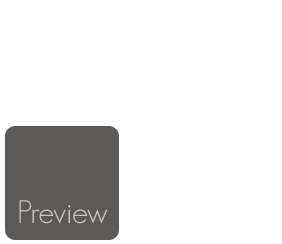
<style>
.page{position:relative;width:282px;height:244px;background:#ffffff}
.page>*{position:absolute;margin:0}
.t1{font:32px "GeosansLight";color:#cac4c4}
</style>
<div class="page">
<p class="t1" style="left:19px;top:200px;width:89px;height:24px">Preview</p>
</div>
